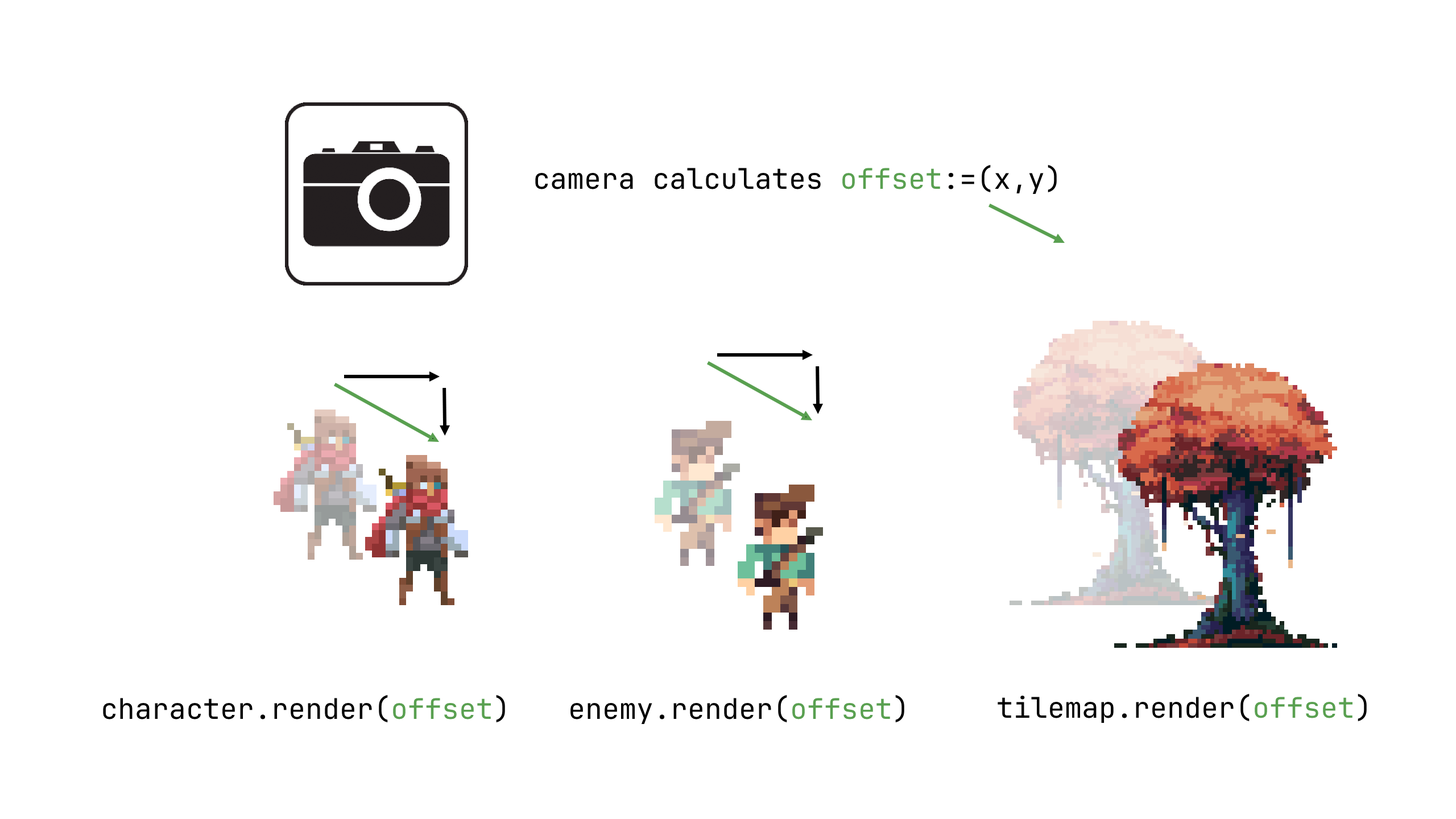
<style>
.page{position:relative;width:1456px;height:819px;background:#ffffff}
.page>*{position:absolute;margin:0}
.t1{font:28.4px "JetBrainsMonoNL-Regular";color:#000000}
.t2{font:28.4px "JetBrainsMonoNL-Regular";color:#59a050}
</style>
<div class="page">
<p class="t1" style="left:535px;top:165px;width:522px;height:29px">camera calculates <span class="t2">offset</span>:=(x,y)</p>
<p class="t1" style="left:103px;top:695px;width:402px;height:27px">character.render(<span class="t2">offset</span>)</p>
<p class="t1" style="left:570px;top:695px;width:334px;height:29px">enemy.render(<span class="t2">offset</span>)</p>
<p class="t1" style="left:998px;top:694px;width:369px;height:29px">tilemap.render(<span class="t2">offset</span>)</p>
</div>
